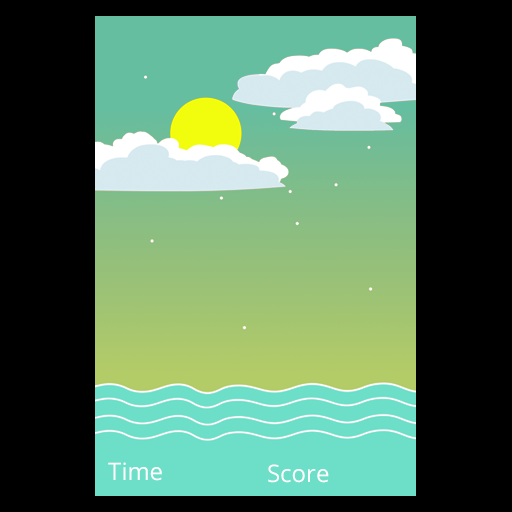
<style>
.page{position:relative;width:512px;height:512px;background:#000000}
.page>*{position:absolute;margin:0}
.t1{font:24px "OpenSans";color:#ffffff}
</style>
<div class="page">
<p class="t1" style="left:108px;top:462px;width:54px;height:19px">Time</p>
<p class="t1" style="left:268px;top:464px;width:61px;height:19px">Score</p>
</div>
